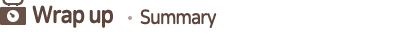
<style>
.page{position:relative;width:406px;height:52px;background:#ffffff}
.page>*{position:absolute;margin:0}
.t1{font:24px "NanumSquareRoundEB";letter-spacing:-0.05em;color:#5e453c;scale:0.9 1}
.t2{font:20px "NanumSquareRoundB";letter-spacing:-0.05em;color:#5e453c;scale:0.9 1}
</style>
<div class="page">
<p class="t1" style="left:32px;top:5px;width:81px;height:23px">Wrap up</p>
<p class="t2" style="left:140px;top:9px;width:77px;height:19px">Summary</p>
</div>
